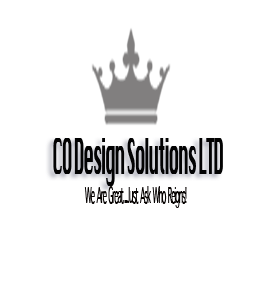
<style>
.page{position:relative;width:278px;height:286px;background:#ffffff}
.page>*{position:absolute;margin:0}
.t1{font:48.5px "Krungthep";letter-spacing:-0.1em;color:#030303;scale:0.35 1}
.t2{font:30.3px "AppleSymbols";letter-spacing:-0.1em;color:#060200;scale:0.35 1}
</style>
<div class="page">
<p class="t1" style="left:53px;top:138px;width:170px;height:48px">CO Design Solutions LTD</p>
<p class="t2" style="left:84px;top:186px;width:103px;height:22px">We Are Great...Just Ask Who Reigns!</p>
</div>
